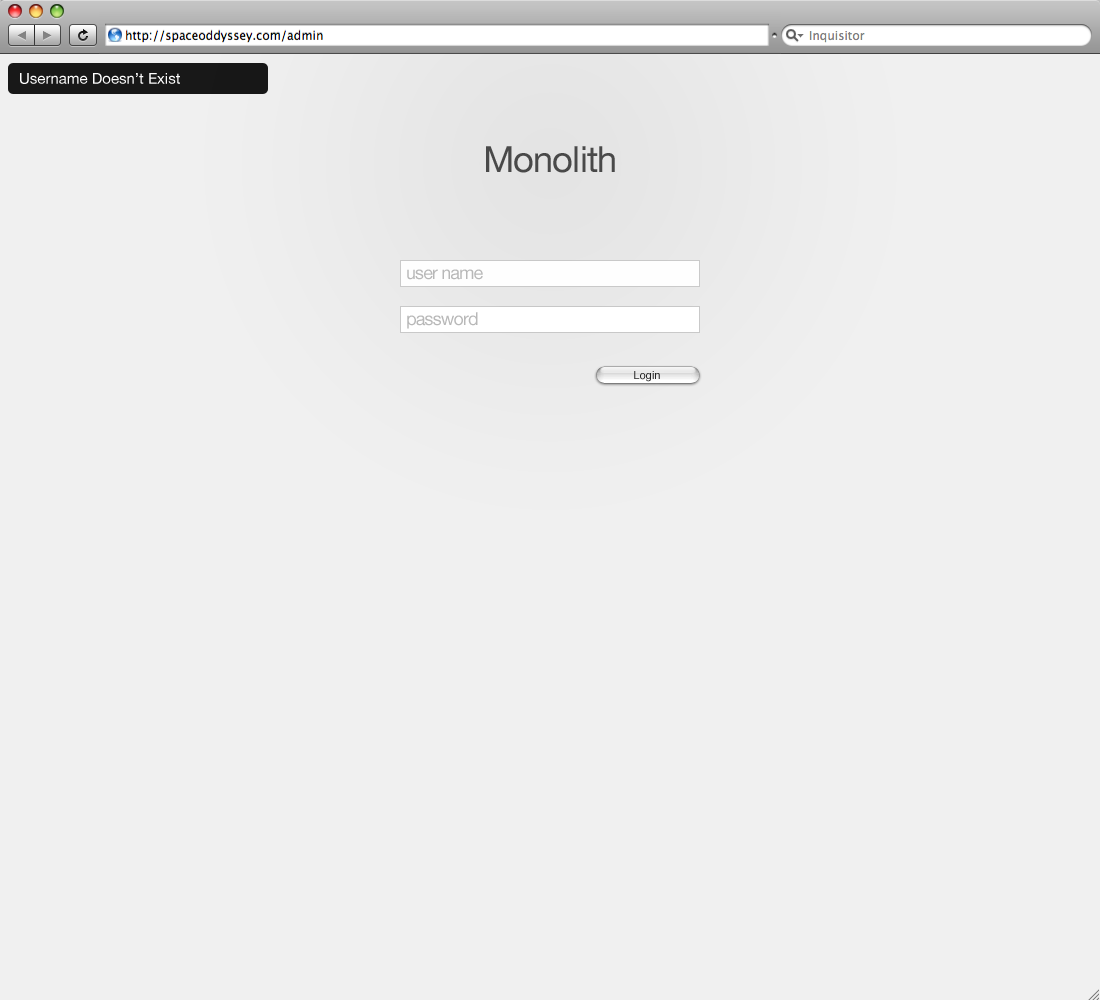
<style>
.page{position:relative;width:1100px;height:1000px;background:#f0f0f0}
.page>*{position:absolute;margin:0}
.t1{font:15px "HelveticaNeue";color:#fefefe}
.t2{font:36px "HelveticaNeue";letter-spacing:-0.02em;color:#494949}
.t3{font:18px "HelveticaNeue";letter-spacing:-0.05em;color:#b8b8b8}
.t4{font:11px "Helvetica";color:#242424}
</style>
<div class="page">
<p class="t1" style="left:20px;top:73px;width:160px;height:11px">Username Doesn’t Exist</p>
<p class="t2" style="left:486px;top:146px;width:129px;height:27px">Monolith</p>
<p class="t3" style="left:407px;top:269px;width:76px;height:11px">user name</p>
<p class="t3" style="left:407px;top:312px;width:71px;height:17px">password</p>
<p class="t4" style="left:634px;top:371px;width:26px;height:11px">Login</p>
</div>
